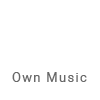
<style>
.page{position:relative;width:100px;height:100px;background:#ffffff}
.page>*{position:absolute;margin:0}
.t1{font:14.3px "Roboto-Regular";letter-spacing:0.1em;color:#686868;scale:0.91 1}
</style>
<div class="page">
<p class="t1" style="left:12px;top:72px;width:75px;height:10px">Own Music</p>
</div>
